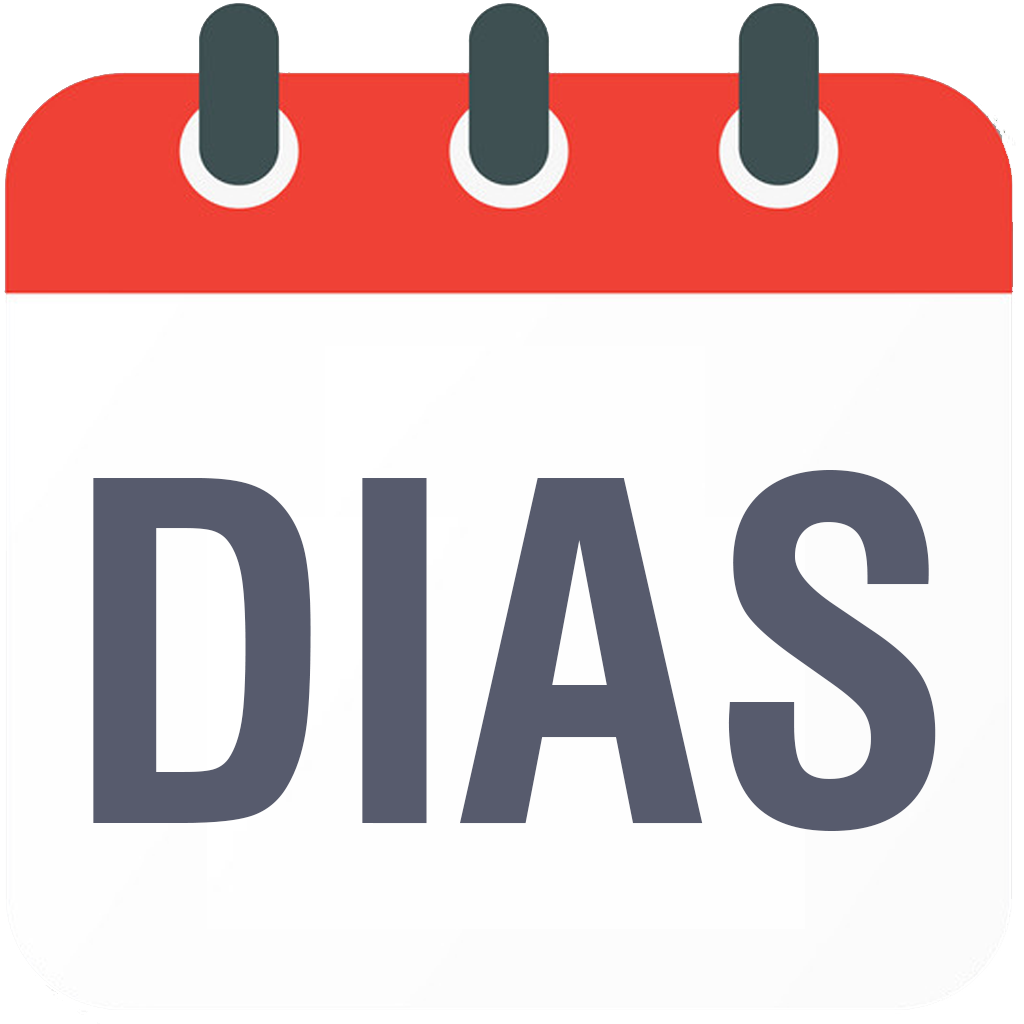
<style>
.page{position:relative;width:1024px;height:1024px;background:#fefefe}
.page>*{position:absolute;margin:0}
.t1{font:458.3px "Swiss721BT-BoldCondensed";color:#575b6d}
</style>
<div class="page">
<p class="t1" style="left:93px;top:470px;width:843px;height:361px">DIAS</p>
</div>
